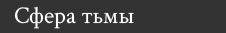
<style>
.page{position:relative;width:226px;height:33px;background:#333333}
.page>*{position:absolute;margin:0}
.t1{font:24px "CrimsonText-Regular";color:#ffffff}
</style>
<div class="page">
<p class="t1" style="left:14px;top:6px;width:120px;height:23px">Сфера тьмы</p>
</div>
